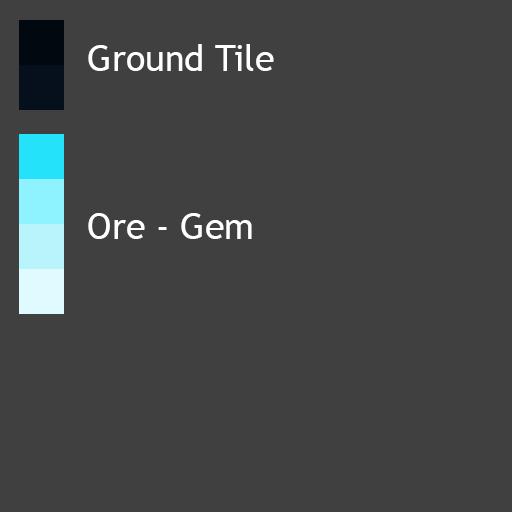
<style>
.page{position:relative;width:512px;height:512px;background:#404040}
.page>*{position:absolute;margin:0}
.t1{font:36px "TrebuchetMS";color:#ffffff}
</style>
<div class="page">
<p class="t1" style="left:88px;top:44px;width:186px;height:27px">Ground Tile</p>
<p class="t1" style="left:88px;top:213px;width:164px;height:26px">Ore - Gem</p>
</div>
